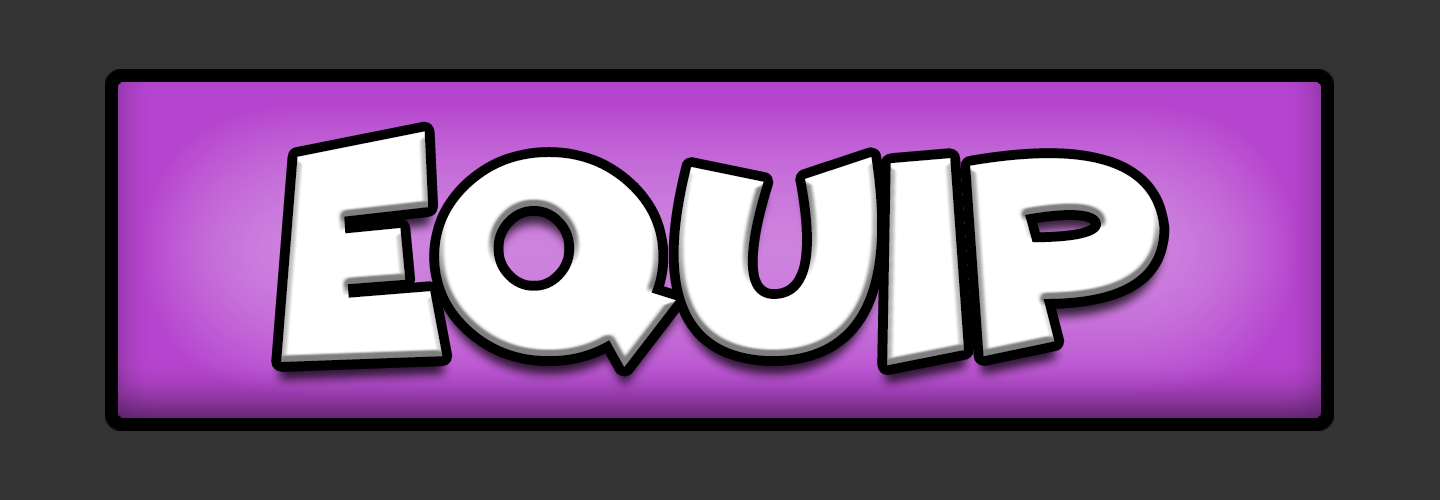
<style>
.page{position:relative;width:1440px;height:500px;background:#333333}
.page>*{position:absolute;margin:0}
.t1{font:290.6px "Funhouse";color:#ffffff;scale:0.95 1}
</style>
<div class="page">
<p class="t1" style="left:281px;top:131px;width:879px;height:236px">EQUIP</p>
</div>
